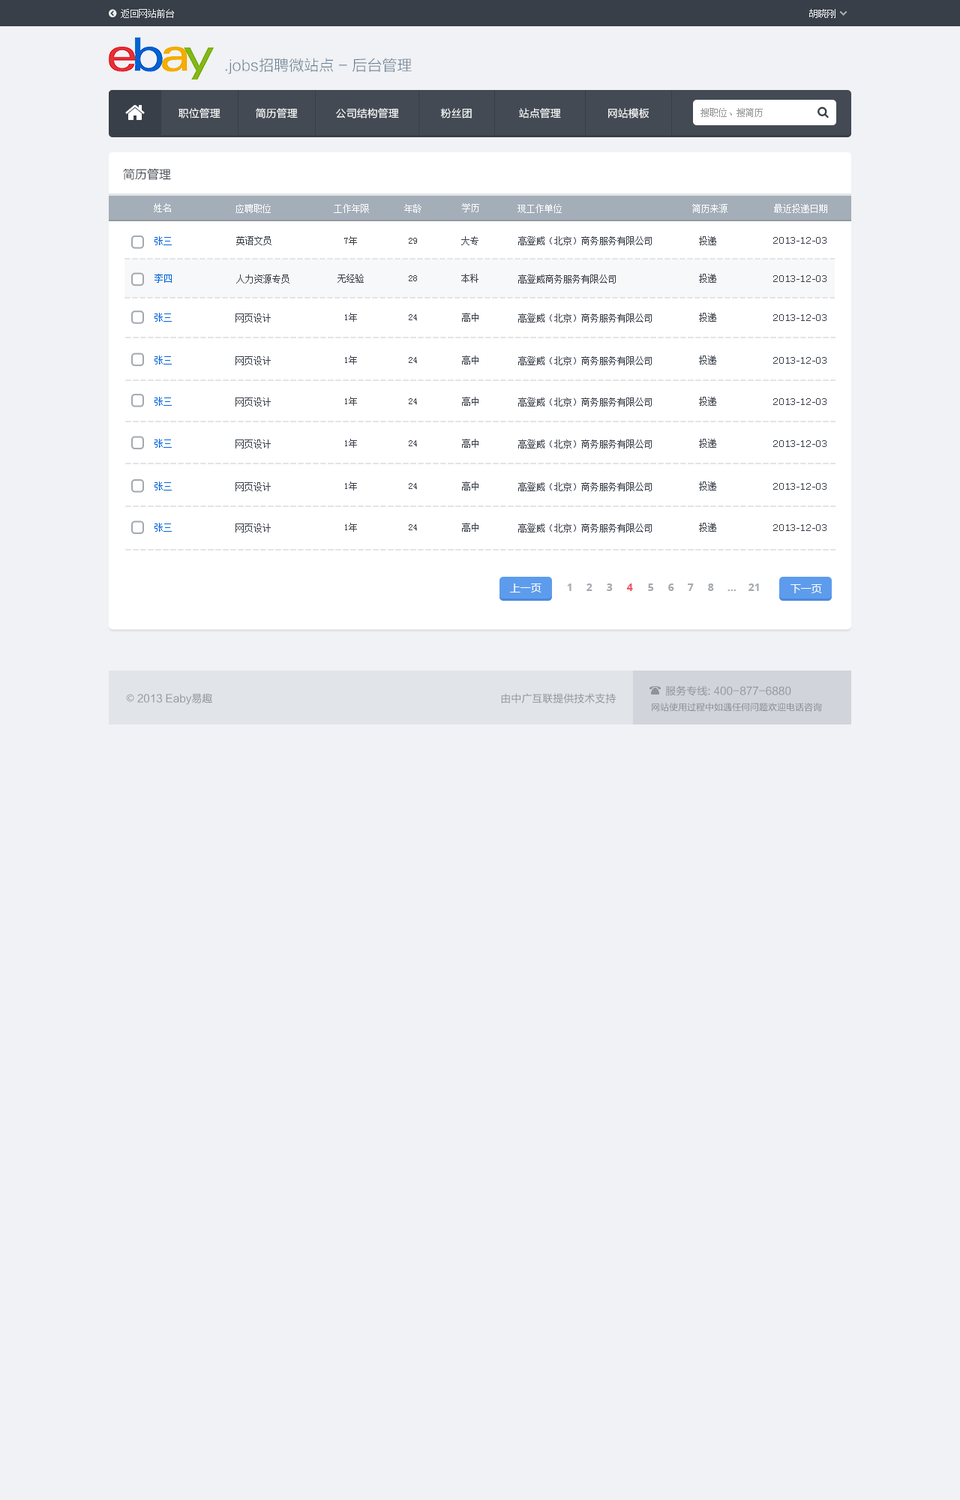
<style>
.page{position:relative;width:960px;height:1500px;background:#f0f2f5}
.page>*{position:absolute;margin:0}
.t1{font:9px "SimSun";color:#eceef0}
.t2{font:15px "FZLTXHK";color:#6c8092}
.t3{font:10.5px "FZLTXHK";color:#ffffff}
.t4{font:9px "SimSun";color:#959596}
.t5{font:12px "FZLTXHK";color:#393f48}
.t6{font:9px "SimSun";color:#ffffff}
.t7{font:9px "SimSun";color:#0063dc}
.t8{font:9px "SimSun";color:#393f48}
.t9{font:9px "Verdana";color:#393f48}
.t10{font:10.5px "MicrosoftYaHei";color:#ffffff}
.t11{font:10.5px "OpenSans-Bold";color:#a4a9ae}
.t12{font:10.5px "OpenSans-Bold";color:#ed5565}
.t13{font:10.5px "FZLTHK--GBK1-0";color:#8f9399}
.t14{font:10.5px "AdobeHeitiStd-Regular";color:#8f9399}
.t15{font:9px "FZLTHJW--GB1-0";color:#868990}
</style>
<div class="page">
<p class="t1" style="left:121px;top:9px;width:53px;height:9px">返回网站前台</p>
<p class="t1" style="left:809px;top:9px;width:27px;height:9px">胡晓刚</p>
<p class="t2" style="left:225px;top:58px;width:187px;height:16px">.jobs招聘微站点 - 后台管理</p>
<p class="t3" style="left:178px;top:108px;width:42px;height:10px">职位管理</p>
<p class="t3" style="left:256px;top:108px;width:42px;height:10px">简历管理</p>
<p class="t3" style="left:336px;top:108px;width:63px;height:10px">公司结构管理</p>
<p class="t3" style="left:441px;top:108px;width:31px;height:10px">粉丝团</p>
<p class="t3" style="left:519px;top:108px;width:42px;height:10px">站点管理</p>
<p class="t3" style="left:608px;top:108px;width:41px;height:10px">网站模板</p>
<p class="t4" style="left:700px;top:108px;width:63px;height:9px">搜职位、搜简历</p>
<p class="t5" style="left:123px;top:168px;width:48px;height:12px">简历管理</p>
<p class="t6" style="left:154px;top:203px;width:17px;height:9px">姓名</p>
<p class="t6" style="left:236px;top:204px;width:35px;height:9px">应聘职位</p>
<p class="t6" style="left:334px;top:204px;width:35px;height:9px">工作年限</p>
<p class="t6" style="left:404px;top:204px;width:18px;height:9px">年龄</p>
<p class="t6" style="left:462px;top:203px;width:17px;height:9px">学历</p>
<p class="t6" style="left:518px;top:204px;width:44px;height:9px">现工作单位</p>
<p class="t6" style="left:692px;top:204px;width:36px;height:9px">简历来源</p>
<p class="t6" style="left:774px;top:204px;width:53px;height:9px">最近投递日期</p>
<p class="t7" style="left:154px;top:236px;width:18px;height:9px">张三</p>
<p class="t8" style="left:236px;top:236px;width:36px;height:9px">英语文员</p>
<p class="t8" style="left:344px;top:236px;width:13px;height:9px">7年</p>
<p class="t8" style="left:409px;top:238px;width:8px;height:6px">29</p>
<p class="t8" style="left:461px;top:236px;width:17px;height:9px">大专</p>
<p class="t8" style="left:518px;top:236px;width:134px;height:9px">高登威（北京）商务服务有限公司</p>
<p class="t8" style="left:699px;top:236px;width:17px;height:9px">投递</p>
<p class="t9" style="left:773px;top:237px;width:53px;height:7px">2013-12-03</p>
<p class="t7" style="left:154px;top:274px;width:18px;height:9px">李四</p>
<p class="t8" style="left:236px;top:274px;width:54px;height:10px">人力资源专员</p>
<p class="t8" style="left:338px;top:274px;width:26px;height:9px">无经验</p>
<p class="t8" style="left:409px;top:275px;width:8px;height:6px">28</p>
<p class="t8" style="left:461px;top:274px;width:17px;height:9px">本科</p>
<p class="t8" style="left:518px;top:274px;width:98px;height:10px">高登威商务服务有限公司</p>
<p class="t8" style="left:699px;top:274px;width:17px;height:9px">投递</p>
<p class="t9" style="left:773px;top:275px;width:53px;height:7px">2013-12-03</p>
<p class="t7" style="left:154px;top:313px;width:18px;height:9px">张三</p>
<p class="t8" style="left:236px;top:314px;width:35px;height:8px">网页设计</p>
<p class="t8" style="left:345px;top:313px;width:12px;height:9px">1年</p>
<p class="t8" style="left:409px;top:314px;width:8px;height:6px">24</p>
<p class="t8" style="left:462px;top:313px;width:16px;height:9px">高中</p>
<p class="t8" style="left:518px;top:314px;width:134px;height:8px">高登威（北京）商务服务有限公司</p>
<p class="t8" style="left:699px;top:313px;width:17px;height:9px">投递</p>
<p class="t9" style="left:773px;top:314px;width:53px;height:7px">2013-12-03</p>
<p class="t7" style="left:154px;top:356px;width:18px;height:8px">张三</p>
<p class="t8" style="left:236px;top:356px;width:35px;height:9px">网页设计</p>
<p class="t8" style="left:345px;top:356px;width:12px;height:8px">1年</p>
<p class="t8" style="left:409px;top:357px;width:8px;height:6px">24</p>
<p class="t8" style="left:462px;top:356px;width:16px;height:8px">高中</p>
<p class="t8" style="left:518px;top:356px;width:134px;height:9px">高登威（北京）商务服务有限公司</p>
<p class="t8" style="left:699px;top:356px;width:17px;height:8px">投递</p>
<p class="t9" style="left:773px;top:357px;width:53px;height:7px">2013-12-03</p>
<p class="t7" style="left:154px;top:397px;width:18px;height:9px">张三</p>
<p class="t8" style="left:236px;top:398px;width:35px;height:8px">网页设计</p>
<p class="t8" style="left:345px;top:397px;width:12px;height:9px">1年</p>
<p class="t8" style="left:409px;top:398px;width:8px;height:6px">24</p>
<p class="t8" style="left:462px;top:397px;width:16px;height:9px">高中</p>
<p class="t8" style="left:518px;top:398px;width:134px;height:8px">高登威（北京）商务服务有限公司</p>
<p class="t8" style="left:699px;top:397px;width:17px;height:9px">投递</p>
<p class="t9" style="left:773px;top:398px;width:53px;height:7px">2013-12-03</p>
<p class="t7" style="left:154px;top:439px;width:18px;height:9px">张三</p>
<p class="t8" style="left:236px;top:440px;width:35px;height:8px">网页设计</p>
<p class="t8" style="left:345px;top:439px;width:12px;height:9px">1年</p>
<p class="t8" style="left:409px;top:440px;width:8px;height:6px">24</p>
<p class="t8" style="left:462px;top:439px;width:16px;height:9px">高中</p>
<p class="t8" style="left:518px;top:440px;width:134px;height:8px">高登威（北京）商务服务有限公司</p>
<p class="t8" style="left:699px;top:439px;width:17px;height:9px">投递</p>
<p class="t9" style="left:773px;top:440px;width:53px;height:7px">2013-12-03</p>
<p class="t7" style="left:154px;top:482px;width:18px;height:8px">张三</p>
<p class="t8" style="left:236px;top:482px;width:35px;height:9px">网页设计</p>
<p class="t8" style="left:345px;top:482px;width:12px;height:8px">1年</p>
<p class="t8" style="left:409px;top:483px;width:8px;height:6px">24</p>
<p class="t8" style="left:462px;top:482px;width:16px;height:8px">高中</p>
<p class="t8" style="left:518px;top:482px;width:134px;height:9px">高登威（北京）商务服务有限公司</p>
<p class="t8" style="left:699px;top:482px;width:17px;height:8px">投递</p>
<p class="t9" style="left:773px;top:483px;width:53px;height:7px">2013-12-03</p>
<p class="t7" style="left:154px;top:523px;width:18px;height:9px">张三</p>
<p class="t8" style="left:236px;top:524px;width:35px;height:8px">网页设计</p>
<p class="t8" style="left:345px;top:523px;width:12px;height:9px">1年</p>
<p class="t8" style="left:409px;top:524px;width:8px;height:6px">24</p>
<p class="t8" style="left:462px;top:523px;width:16px;height:9px">高中</p>
<p class="t8" style="left:518px;top:524px;width:134px;height:8px">高登威（北京）商务服务有限公司</p>
<p class="t8" style="left:699px;top:523px;width:17px;height:9px">投递</p>
<p class="t9" style="left:773px;top:524px;width:53px;height:7px">2013-12-03</p>
<p class="t10" style="left:510px;top:584px;width:32px;height:8px">上一页</p>
<p class="t11" style="left:567px;top:584px;width:5px;height:7px">1</p>
<p class="t11" style="left:586px;top:584px;width:6px;height:7px">2</p>
<p class="t11" style="left:607px;top:584px;width:6px;height:7px">3</p>
<p class="t12" style="left:626px;top:584px;width:7px;height:7px">4</p>
<p class="t11" style="left:648px;top:584px;width:6px;height:7px">5</p>
<p class="t11" style="left:668px;top:584px;width:6px;height:7px">6</p>
<p class="t11" style="left:688px;top:584px;width:6px;height:7px">7</p>
<p class="t11" style="left:708px;top:584px;width:6px;height:7px">8</p>
<p class="t11" style="left:728px;top:590px;width:8px;height:1px">...</p>
<p class="t11" style="left:748px;top:584px;width:11px;height:7px">21</p>
<p class="t10" style="left:790px;top:584px;width:32px;height:9px">下一页</p>
<p class="t13" style="left:665px;top:686px;width:126px;height:10px">服务专线: 400-877-6880</p>
<p class="t13" style="left:126px;top:693px;width:86px;height:12px"><span class="t14">©</span> 2013 Eaby易趣</p>
<p class="t13" style="left:501px;top:693px;width:115px;height:11px">由中广互联提供技术支持</p>
<p class="t15" style="left:652px;top:703px;width:170px;height:9px">网站使用过程中如遇任何问题欢迎电话咨询</p>
</div>
